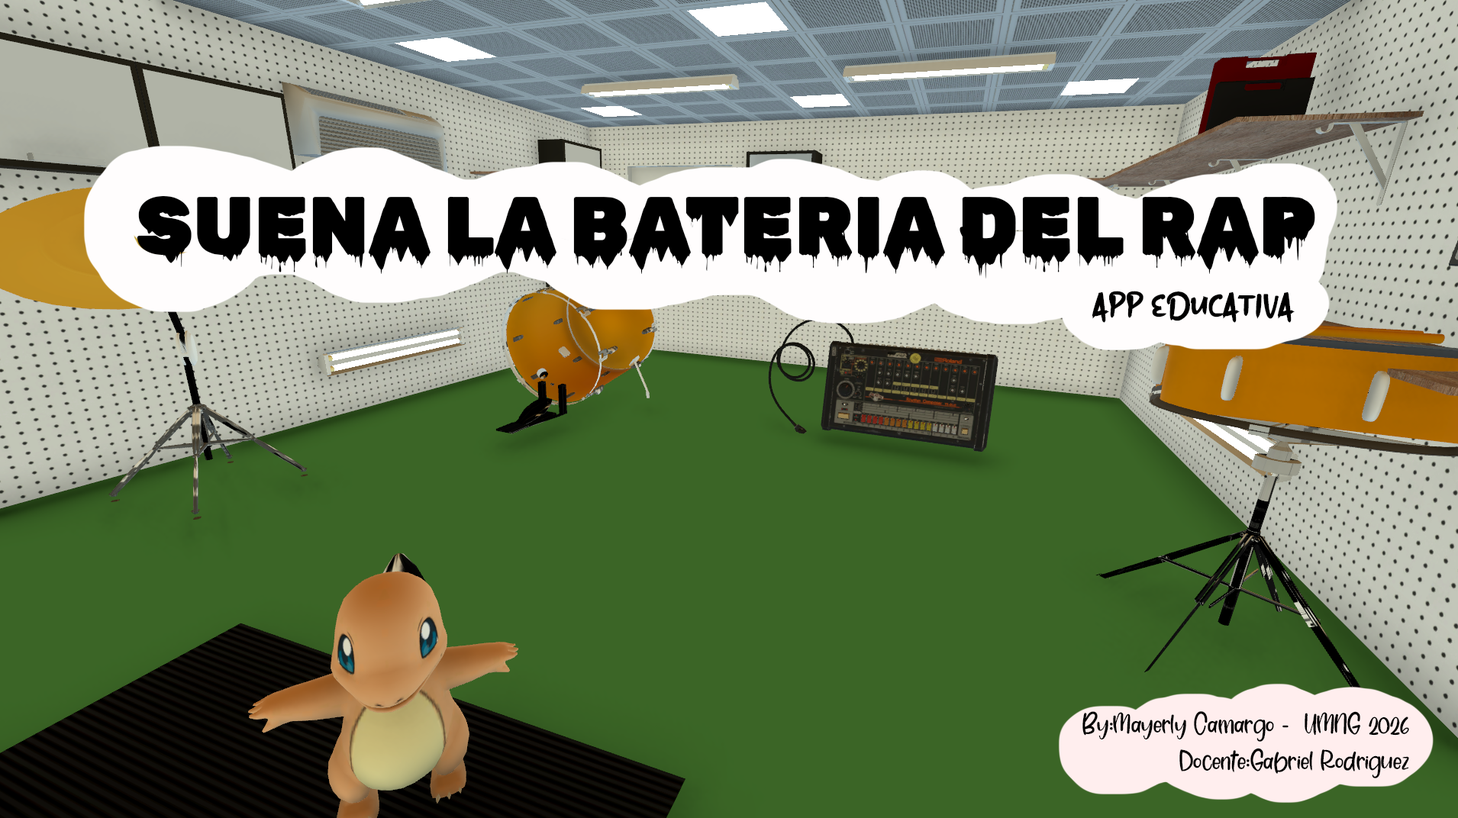
<style>
.page{position:relative;width:1458px;height:818px;background:#3b6526}
.page>*{position:absolute;margin:0}
.t1{font:81.7px "RubikWetPaint-Regular";color:#000000}
.t2{font:41px "aBusterDown";color:#000000}
.t3{font:30.8px "AlwaysBeLovedRegular";color:#000000}
</style>
<div class="page">
<p class="t1" style="left:137px;top:196px;width:1178px;height:83px">SUENA LA BATERIA DEL RAP</p>
<p class="t2" style="left:1092px;top:291px;width:202px;height:32px">APP EDUCATIVA</p>
<p class="t3" style="left:1082px;top:711px;width:327px;height:67px;text-align:right">By:Mayerly Camargo -  UMNG 2026<br>Docente:Gabriel Rodriguez</p>
</div>
